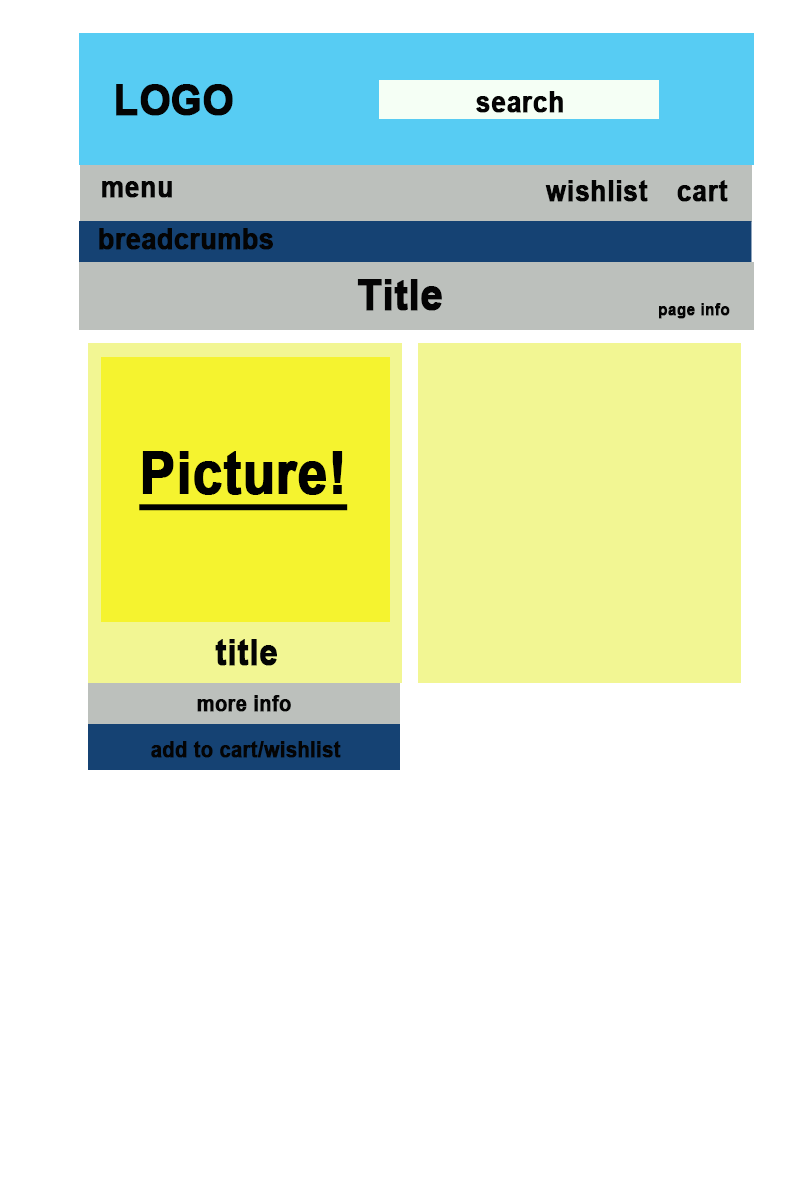
<style>
.page{position:relative;width:800px;height:1200px;background:#ffffff}
.page>*{position:absolute;margin:0}
.t1{font:43.2px "Arial-BoldMT";color:#040404;font-weight:bold;scale:0.92 1}
.t2{font:28.8px "Arial-BoldMT";color:#040404;font-weight:bold;scale:0.92 1}
.t3{font:28.9px "Arial-BoldMT";color:#040404;font-weight:bold;scale:0.92 1}
.t4{font:16.8px "Arial-BoldMT";color:#040404;font-weight:bold;scale:0.92 1}
.t5{font:57.6px "Arial-BoldMT";color:#000000;font-weight:bold;text-decoration:underline;scale:0.92 1}
.t6{font:36px "Arial-BoldMT";color:#040404;font-weight:bold;scale:0.92 1}
.t7{font:21.6px "Arial-BoldMT";color:#040404;font-weight:bold;scale:0.92 1}
</style>
<div class="page">
<p class="t1" style="left:116px;top:84px;width:117px;height:32px">LOGO</p>
<p class="t2" style="left:476px;top:91px;width:87px;height:22px">search</p>
<p class="t2" style="left:102px;top:181px;width:70px;height:17px">menu</p>
<p class="t2" style="left:545px;top:180px;width:103px;height:22px">wishlist</p>
<p class="t2" style="left:677px;top:180px;width:51px;height:22px">cart</p>
<p class="t3" style="left:99px;top:228px;width:174px;height:22px">breadcrumbs</p>
<p class="t1" style="left:357px;top:279px;width:85px;height:32px">Title</p>
<p class="t4" style="left:659px;top:303px;width:71px;height:16px">page info</p>
<p class="t5" style="left:139px;top:451px;width:209px;height:60px">Picture!</p>
<p class="t6" style="left:215px;top:639px;width:62px;height:27px">title</p>
<p class="t7" style="left:197px;top:695px;width:94px;height:17px">more info</p>
<p class="t7" style="left:151px;top:741px;width:190px;height:17px">add to cart/wishlist</p>
</div>
